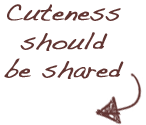
<style>
.page{position:relative;width:146px;height:125px;background:#ffffff}
.page>*{position:absolute;margin:0}
.t1{font:24px "Handwriting-Dakota";color:#613532;font-weight:bold}
</style>
<div class="page">
<p class="t1" style="left:4px;top:4px;width:120px;height:75px;text-align:center">Cuteness<br>should<br>be shared</p>
</div>
